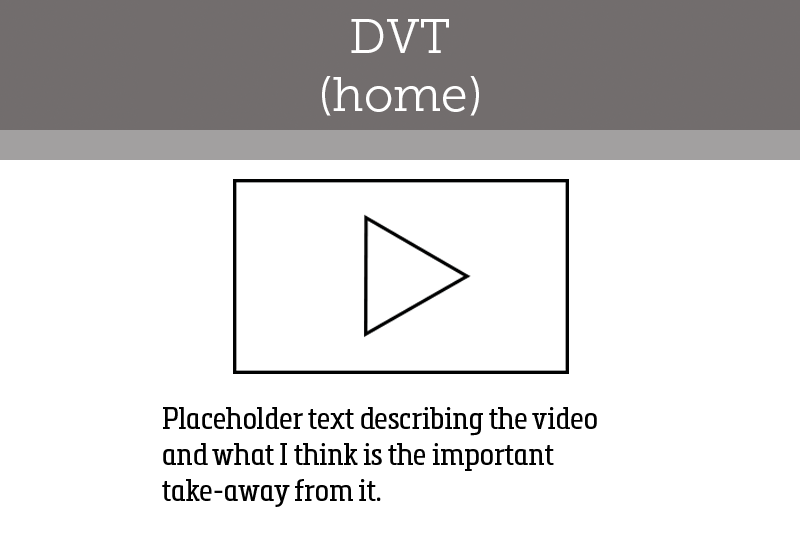
<style>
.page{position:relative;width:800px;height:535px;background:#ffffff}
.page>*{position:absolute;margin:0}
.t1{font:48px "MuseoSlab-300";color:#ffffff}
.t2{font:30px "MetronicSlabNarrowRegular";color:#000000}
</style>
<div class="page">
<p class="t1" style="left:322px;top:19px;width:157px;height:97px;text-align:center">DVT<br>(home)</p>
<p class="t2" style="left:162px;top:407px;width:435px;height:100px">Placeholder text describing the video and what I think is the important take-away from it.</p>
</div>
